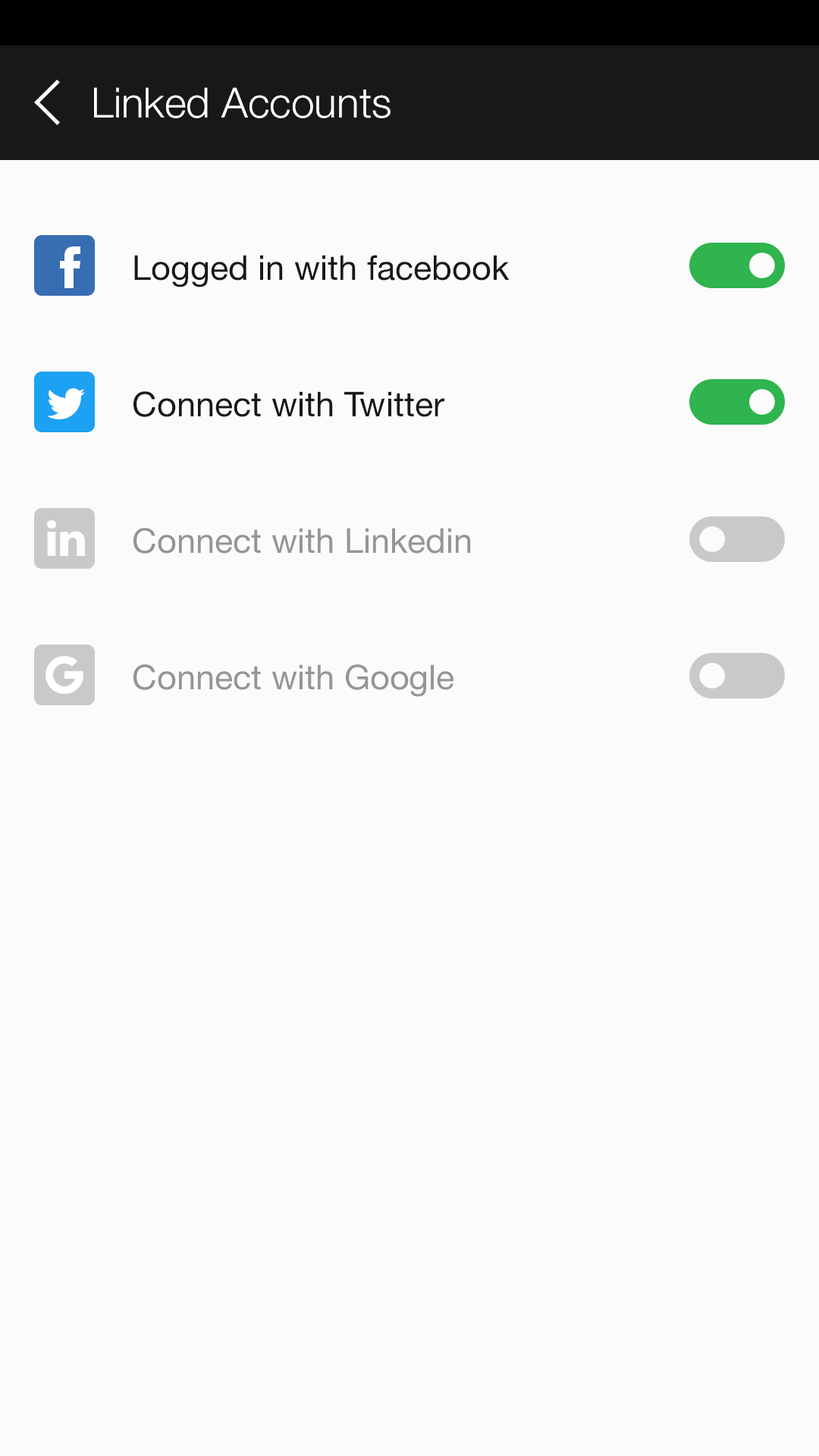
<style>
.page{position:relative;width:819px;height:1456px;background:#fbfbfb}
.page>*{position:absolute;margin:0}
.t1{font:41.7px "HelveticaNeue-Light";color:#ffffff}
.t2{font:34.1px "HelveticaNeue";color:#181818}
.t3{font:34.1px "HelveticaNeue";color:#949598}
</style>
<div class="page">
<p class="t1" style="left:94px;top:87px;width:297px;height:31px">Linked Accounts</p>
<p class="t2" style="left:134px;top:255px;width:376px;height:32px">Logged in with facebook</p>
<p class="t2" style="left:133px;top:391px;width:311px;height:26px">Connect with Twitter</p>
<p class="t3" style="left:133px;top:528px;width:338px;height:26px">Connect with Linkedin</p>
<p class="t3" style="left:133px;top:664px;width:320px;height:33px">Connect with Google</p>
</div>
